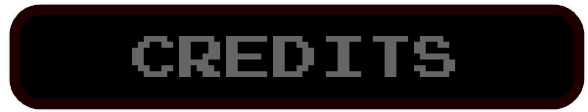
<style>
.page{position:relative;width:588px;height:112px;background:#000000}
.page>*{position:absolute;margin:0}
.t1{font:47px "Super-Mario-Bros.-NES";color:#656565}
</style>
<div class="page">
<p class="t1" style="left:132px;top:35px;width:324px;height:42px">CREDITS</p>
</div>
